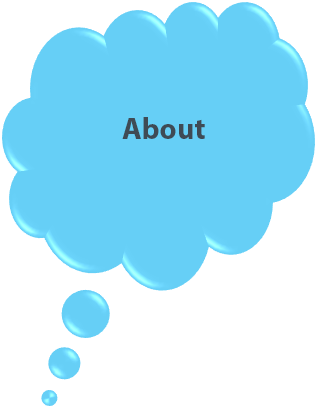
<style>
.page{position:relative;width:317px;height:408px;background:#66cff6}
.page>*{position:absolute;margin:0}
.t1{font:30px "MyriadPro-Bold";color:#3f4b55}
</style>
<div class="page">
<p class="t1" style="left:122px;top:117px;width:83px;height:22px">About</p>
</div>
